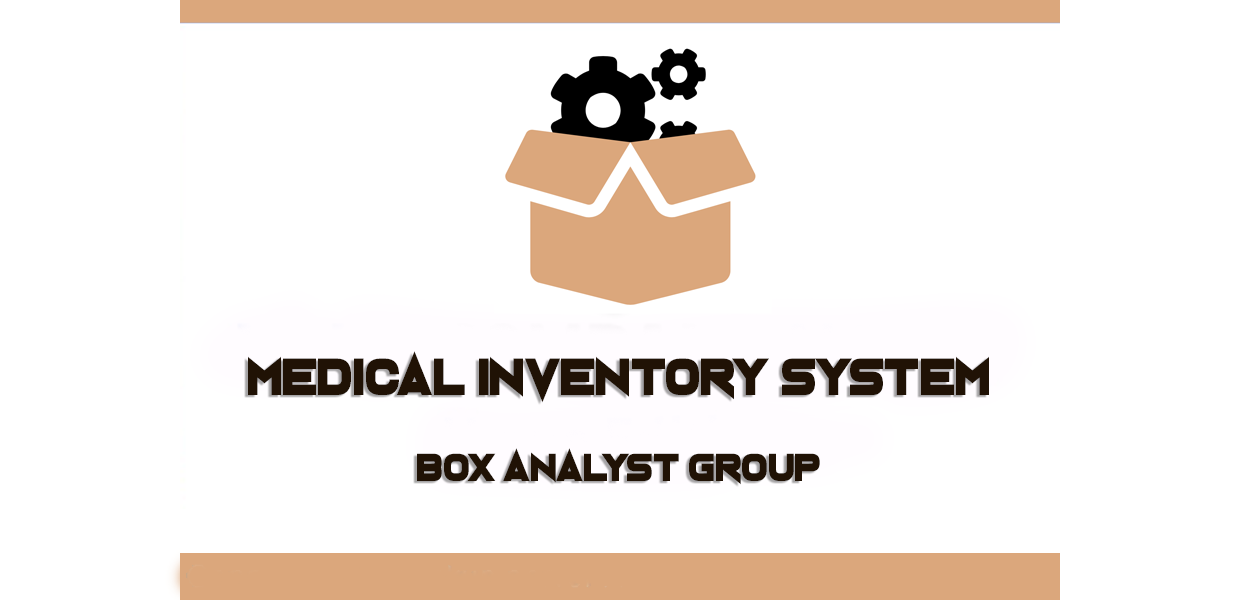
<style>
.page{position:relative;width:1240px;height:600px;background:#ffffff}
.page>*{position:absolute;margin:0}
.t1{font:53.1px "Neuterous";color:#201205;scale:0.91 1}
.t2{font:39.9px "Neuterous";color:#201205;scale:0.91 1}
</style>
<div class="page">
<p class="t1" style="left:248px;top:351px;width:741px;height:52px">Medical Inventory System</p>
<p class="t2" style="left:417px;top:448px;width:403px;height:37px">Box Analyst Group</p>
</div>
